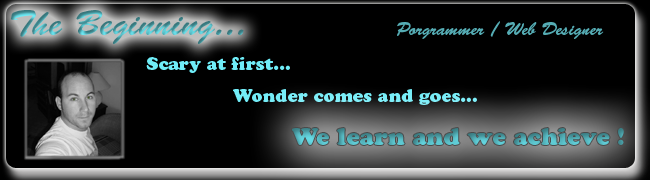
<style>
.page{position:relative;width:650px;height:180px;background:#000000}
.page>*{position:absolute;margin:0}
.t1{font:36px "BrushScriptStd"}
.t2{font:18px "BrushScriptStd";color:#55acb4}
.t3{font:18px "CooperBlackStd";color:#6fedf8}
.t4{font:18px "CooperBlackStd";color:#72edf8}
.t5{font:24px "CooperBlackStd"}
</style>
<div class="page">
<p class="t1" style="left:11px;top:10px;width:233px;height:34px">The Beginning...</p>
<p class="t2" style="left:397px;top:21px;width:207px;height:18px">Porgrammer / Web Designer</p>
<p class="t3" style="left:146px;top:57px;width:144px;height:16px">Scary at first...</p>
<p class="t4" style="left:233px;top:89px;width:244px;height:16px">Wonder comes and goes...</p>
<p class="t5" style="left:291px;top:128px;width:333px;height:17px">We learn and we achieve !</p>
</div>
